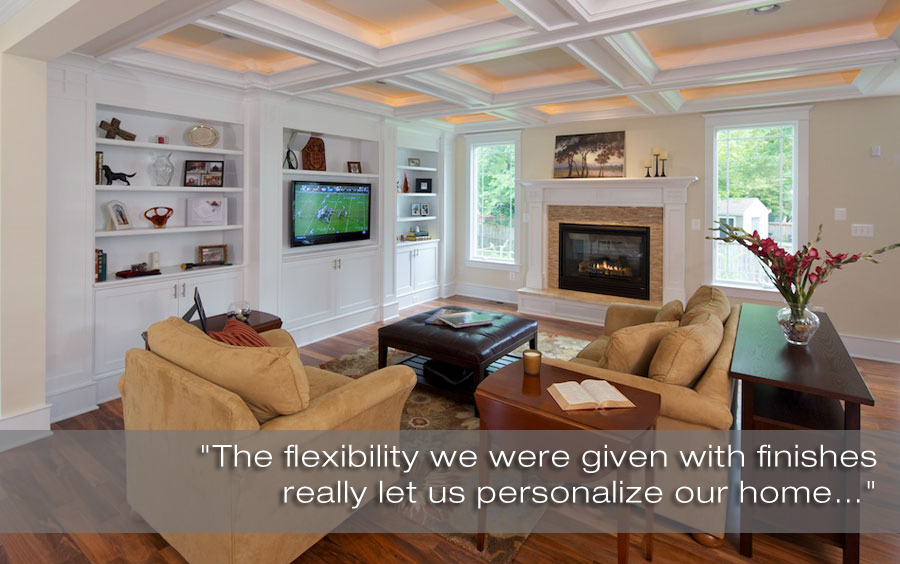
<style>
.page{position:relative;width:900px;height:564px}
.page>*{position:absolute;margin:0}
.t1{font:30px "HelveticaNeueLTStd-LtEx";letter-spacing:0.05em;color:#ffffff}
</style>
<div class="page">
<p class="t1" style="left:202px;top:444px;width:675px;height:65px;text-align:right">"The flexibility we were given with finishes really let us personalize our home…"</p>
</div>
